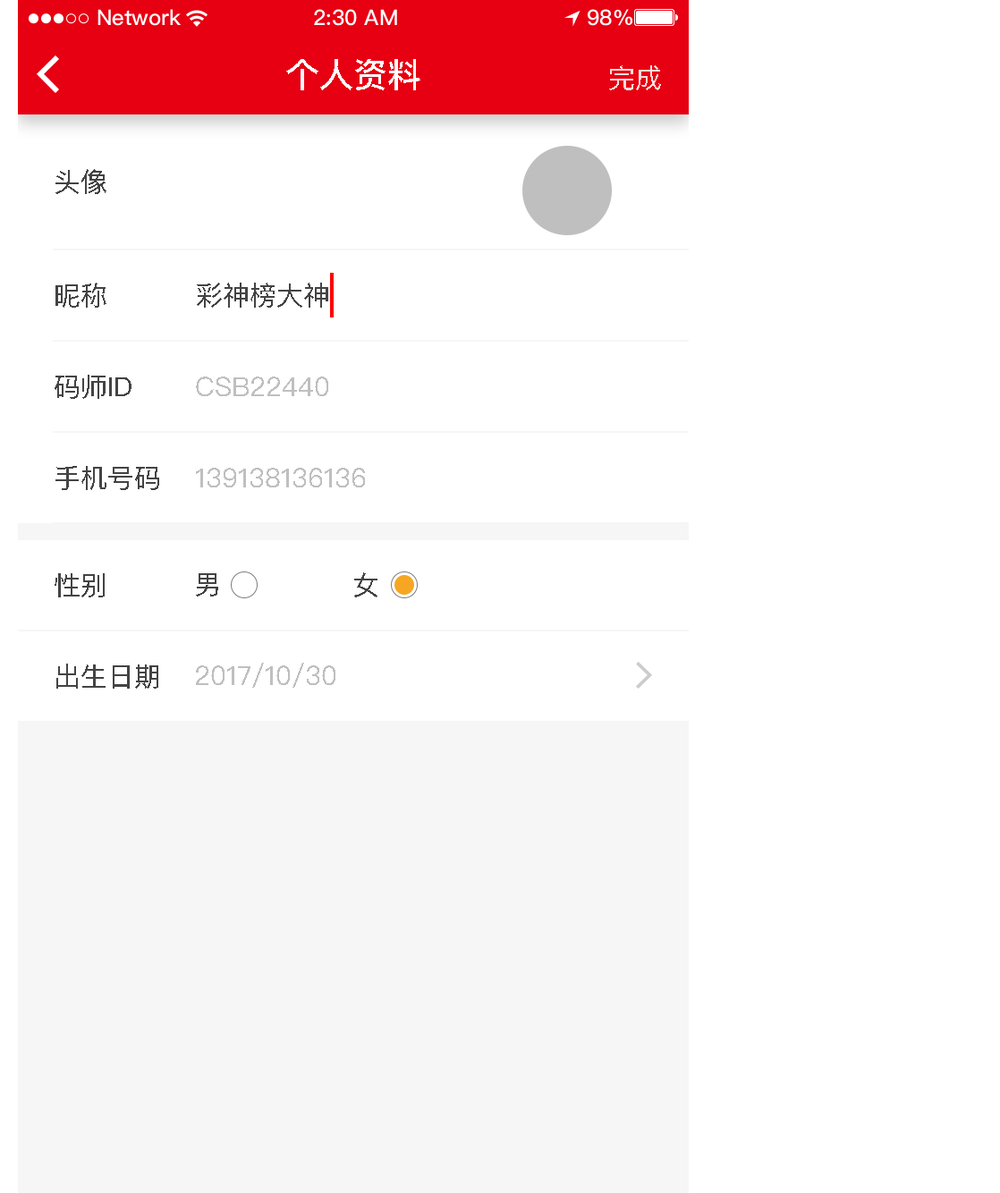
<style>
.page{position:relative;width:1000px;height:1193px;background:#ffffff}
.page>*{position:absolute;margin:0}
.t1{font:34px "PingFangSC-Medium";color:#ffffff;text-transform:uppercase}
.t2{font:26.8px "PingFangSC-Regular";color:#faddde;text-transform:uppercase}
.t3{font:26.8px "PingFangSC-Regular";color:#434343;text-transform:uppercase}
.t4{font:26.8px "PingFangSC-Regular";color:#bfbfbf;text-transform:uppercase}
</style>
<div class="page">
<p class="t1" style="left:286px;top:59px;width:134px;height:31px">个人资料</p>
<p class="t2" style="left:609px;top:65px;width:52px;height:25px">完成</p>
<p class="t3" style="left:55px;top:169px;width:51px;height:25px">头像</p>
<p class="t3" style="left:55px;top:283px;width:51px;height:25px">昵称</p>
<p class="t3" style="left:197px;top:283px;width:131px;height:25px">彩神榜大神</p>
<p class="t3" style="left:55px;top:375px;width:76px;height:24px">码师ID</p>
<p class="t4" style="left:196px;top:376px;width:132px;height:20px">csb22440</p>
<p class="t3" style="left:55px;top:466px;width:104px;height:24px">手机号码</p>
<p class="t4" style="left:196px;top:468px;width:169px;height:19px">139138136136</p>
<p class="t3" style="left:55px;top:573px;width:50px;height:24px">性别</p>
<p class="t3" style="left:196px;top:573px;width:22px;height:23px">男</p>
<p class="t3" style="left:354px;top:572px;width:23px;height:25px">女</p>
<p class="t3" style="left:56px;top:663px;width:102px;height:26px">出生日期</p>
<p class="t4" style="left:196px;top:663px;width:139px;height:25px">2017/10/30</p>
</div>
